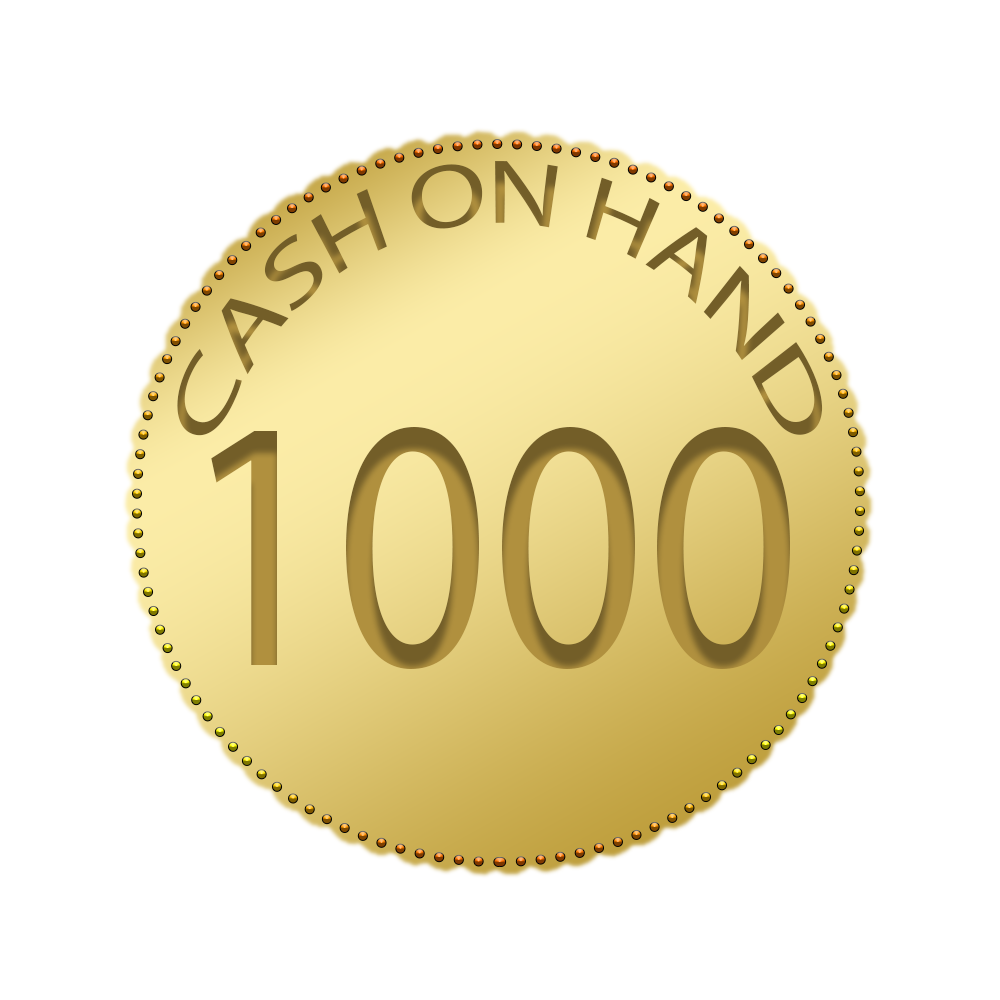
<style>
.page{position:relative;width:1000px;height:1000px;background:#ffffff}
.page>*{position:absolute;margin:0}
.t1{font:91.4px "MyriadPro-Regular";color:#735e29;scale:0.87 1}
.t2{font:360.4px "MyriadPro-Regular";color:#b0903e;scale:0.84 1}
</style>
<div class="page">
<p class="t1" style="left:177px;top:161px;width:646px;height:275px">CASH ON HAND</p>
<p class="t2" style="left:211px;top:427px;width:579px;height:242px">1000</p>
</div>
